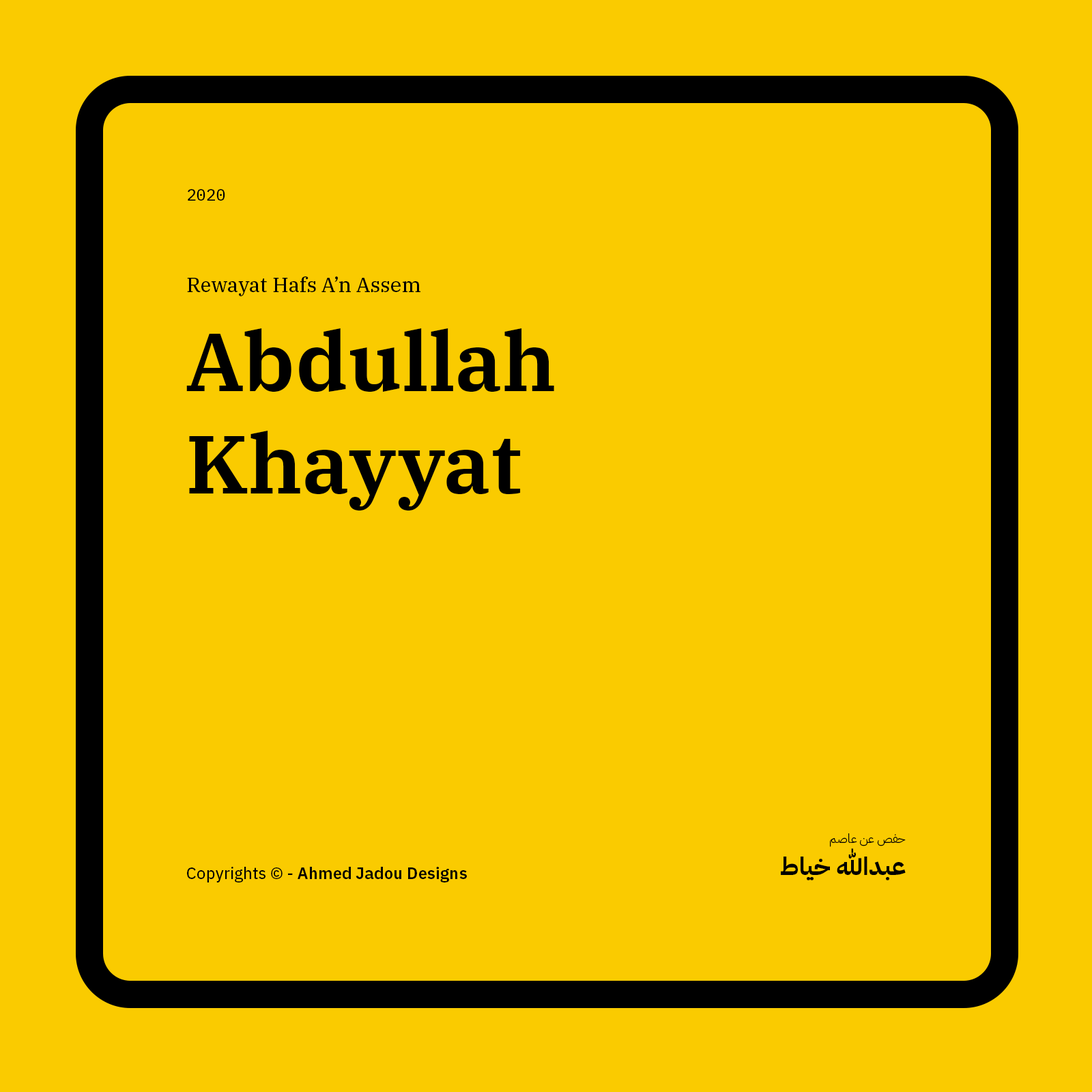
<style>
.page{position:relative;width:1092px;height:1092px;background:#facb00}
.page>*{position:absolute;margin:0}
.t1{font:16.4px "IBMPlexMono-Text";color:#000000}
.t2{font:20.5px "IBMPlexSerif-Text";color:#000000}
.t3{font:81.9px/102.7px "IBMPlexSerif-SemiBold";color:#000000}
.t4{font:12.3px "IBMPlexArabic-Light";color:#000000}
.t5{font:24.6px "IBMPlexArabic-Bold";color:#000000}
.t6{font:16.4px "IBMPlexSans-SemiBold";color:#000000}
.t7{font:16.4px "IBMPlexSans-Text";color:#000000}
</style>
<div class="page">
<p class="t1" style="left:188px;top:189px;width:37px;height:12px">2020</p>
<p class="t2" style="left:187px;top:276px;width:233px;height:20px">Rewayat Hafs A’n Assem</p>
<p class="t3" style="left:186px;top:328px;width:368px;height:183px">Abdullah Khayyat</p>
<p class="t4" style="left:830px;top:833px;width:76px;height:14px">حفص عن عاصم</p>
<p class="t5" style="left:781px;top:848px;width:125px;height:32px">عبدالله خياط</p>
<p class="t6" style="left:187px;top:867px;width:280px;height:15px"><span class="t7">Copyrights © - </span>Ahmed Jadou Designs</p>
</div>
